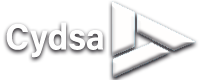
<style>
.page{position:relative;width:200px;height:80px;background:#ffffff}
.page>*{position:absolute;margin:0}
.t1{font:36.9px "AcuminConcept-Bold";color:#fefefe;scale:0.93 1}
</style>
<div class="page">
<p class="t1" style="left:6px;top:22px;width:97px;height:36px">Cydsa</p>
</div>
